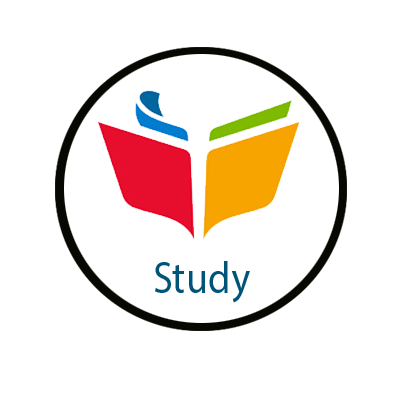
<style>
.page{position:relative;width:397px;height:397px;background:#ffffff}
.page>*{position:absolute;margin:0}
.t1{font:44.5px "MyriadPro-Regular";color:#005479;scale:0.9 1}
</style>
<div class="page">
<p class="t1" style="left:155px;top:261px;width:95px;height:42px">Study</p>
</div>
